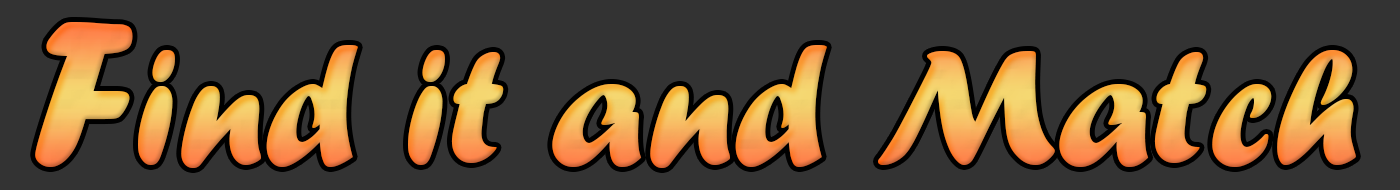
<style>
.page{position:relative;width:1400px;height:190px;background:#333333}
.page>*{position:absolute;margin:0}
.t1{font:169.6px "ForteMT"}
.t2{font:212px "ForteMT"}
</style>
<div class="page">
<p class="t1" style="left:35px;top:22px;width:1321px;height:146px"><span class="t2">F</span>ind it and Match</p>
</div>
